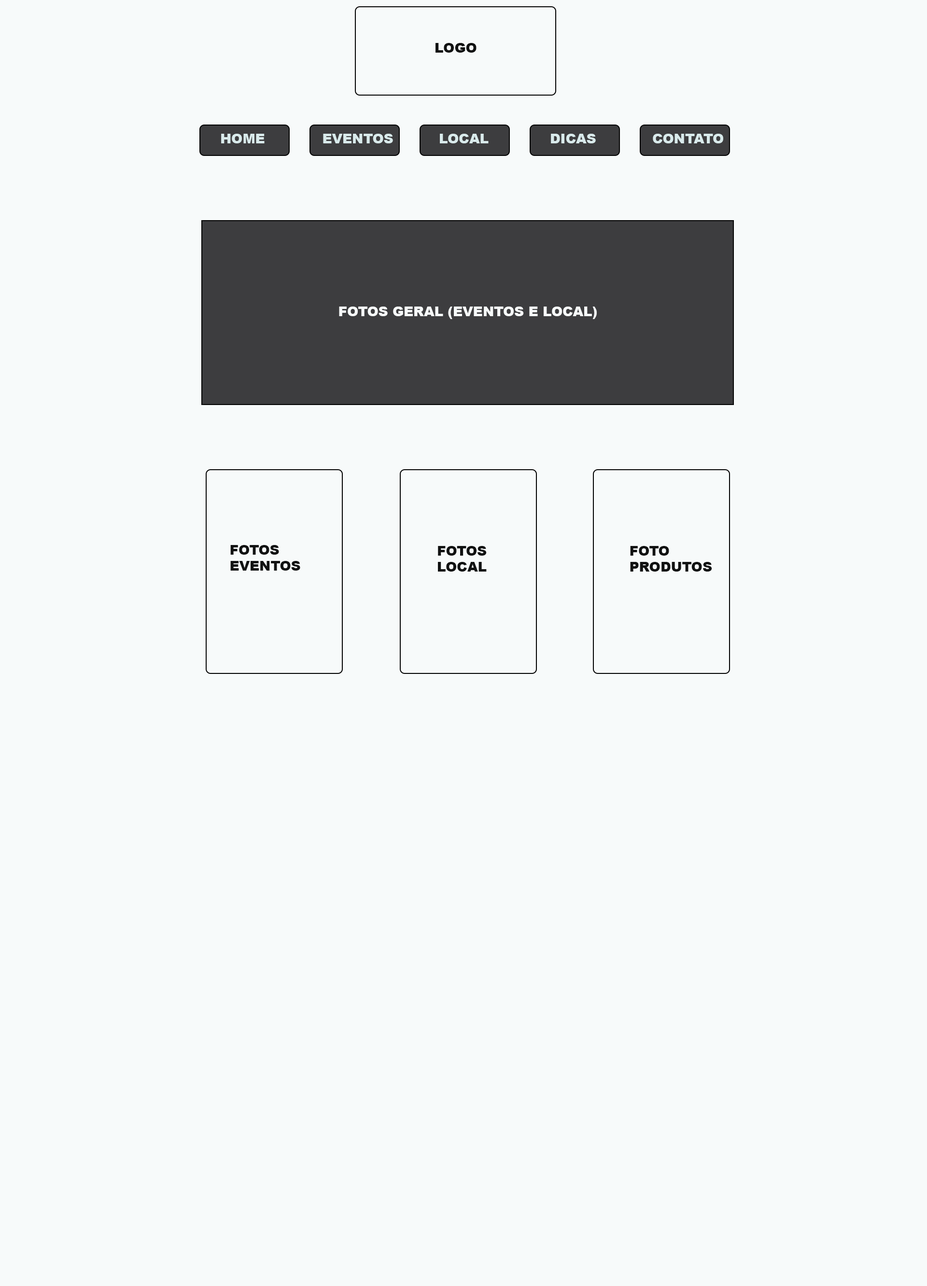
<style>
.page{position:relative;width:927px;height:1286px;background:#f7fafa}
.page>*{position:absolute;margin:0}
.t1{font:13.4px "Arial-Black";color:#111212}
.t2{font:13.4px "Arial-Black";color:#d9eaeb}
.t3{font:13.4px "Arial-Black";color:#f7fafa}
</style>
<div class="page">
<p class="t1" style="left:436px;top:43px;width:41px;height:10px">LOGO</p>
<p class="t2" style="left:221px;top:134px;width:44px;height:9px">HOME</p>
<p class="t2" style="left:323px;top:134px;width:70px;height:9px">EVENTOS</p>
<p class="t2" style="left:440px;top:134px;width:49px;height:9px">LOCAL</p>
<p class="t2" style="left:551px;top:134px;width:45px;height:9px">DICAS</p>
<p class="t2" style="left:653px;top:134px;width:70px;height:9px">CONTATO</p>
<p class="t3" style="left:339px;top:307px;width:258px;height:12px">FOTOS GERAL (EVENTOS E LOCAL)</p>
<p class="t1" style="left:230px;top:545px;width:70px;height:26px">FOTOS <br>EVENTOS</p>
<p class="t1" style="left:438px;top:546px;width:49px;height:26px">FOTOS<br>LOCAL</p>
<p class="t1" style="left:630px;top:546px;width:82px;height:26px">FOTO <br>PRODUTOS</p>
</div>
